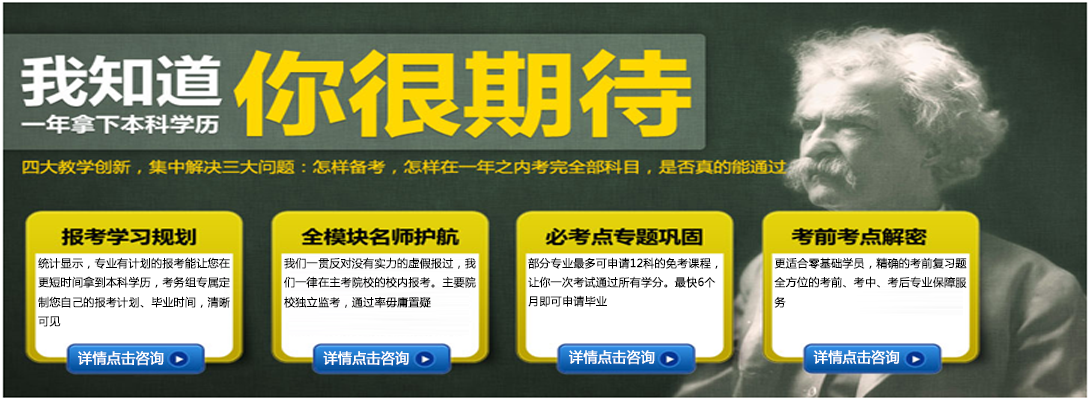
<style>
.page{position:relative;width:1090px;height:400px}
.page>*{position:absolute;margin:0}
.t1{font:11px "MicrosoftYaHei";color:#000000;font-weight:bold}
.t2{font:14px "MicrosoftYaHei";color:#ffffff;font-weight:bold}
</style>
<div class="page">
<p class="t1" style="left:38px;top:257px;width:192px;height:70px">统计显示，专业有计划的报考能让您在<br>更短时间拿到本科学历，考务组专属定<br>制您自己的报考计划、毕业时间，清晰<br>可见</p>
<p class="t1" style="left:284px;top:257px;width:192px;height:51px">我们一贯反对没有实力的虚假报过，我<br>们一律在主考院校的校内报考。主要院<br>校独立监考，通过率毋庸置疑</p>
<p class="t1" style="left:528px;top:257px;width:190px;height:50px">部分专业最多可申请12科的免考课程，<br>让你一次考试通过所有学分。最快6个<br>月即可申请毕业</p>
<p class="t1" style="left:774px;top:257px;width:193px;height:51px">更适合零基础学员，精确的考前复习题<br>全方位的考前、考中、考后专业保障服<br>务</p>
<p class="t2" style="left:78px;top:351px;width:86px;height:15px">详情点击咨询</p>
<p class="t2" style="left:323px;top:351px;width:86px;height:15px">详情点击咨询</p>
<p class="t2" style="left:569px;top:350px;width:86px;height:15px">详情点击咨询</p>
<p class="t2" style="left:813px;top:350px;width:87px;height:15px">详情点击咨询</p>
</div>
